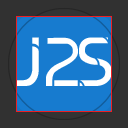
<style>
.page{position:relative;width:128px;height:128px;background:#177bcf}
.page>*{position:absolute;margin:0}
.t1{font:66.5px "Skynet.Enterprise";letter-spacing:-0.075em;color:#ffffff;text-transform:uppercase}
</style>
<div class="page">
<p class="t1" style="left:16px;top:37px;width:96px;height:49px">J2S</p>
</div>
